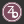
<style>
.page{position:relative;width:24px;height:24px;background:#333333}
.page>*{position:absolute;margin:0}
.t1{font:11.2px "Avenir-Roman";letter-spacing:0.01em;color:#ffffff}
.t2{font:4px "Avenir-Black";letter-spacing:0.01em;color:#ffffff}
</style>
<div class="page">
<p class="t1" style="left:12px;top:8px;width:7px;height:10px">b</p>
<p class="t2" style="left:13px;top:14px;width:3px;height:5px">b</p>
</div>
